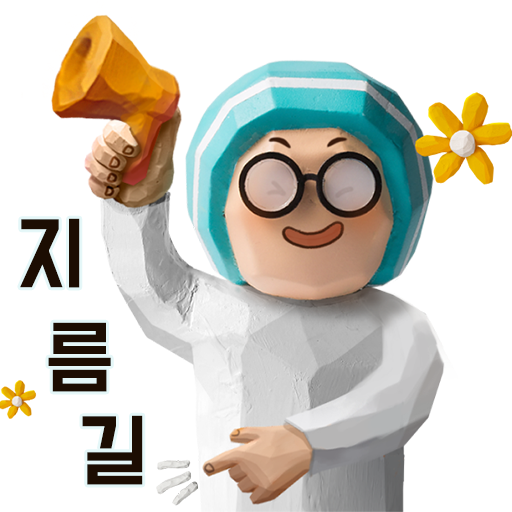
<style>
.page{position:relative;width:512px;height:512px;background:#ffffff}
.page>*{position:absolute;margin:0}
.t1{font:72.4px "BMDoHyeon";letter-spacing:0.025em;color:#1c0d02}
</style>
<div class="page">
<p class="t1" style="left:20px;top:218px;width:60px;height:70px">지</p>
<p class="t1" style="left:48px;top:322px;width:63px;height:70px">름</p>
<p class="t1" style="left:82px;top:415px;width:61px;height:70px">길</p>
</div>
